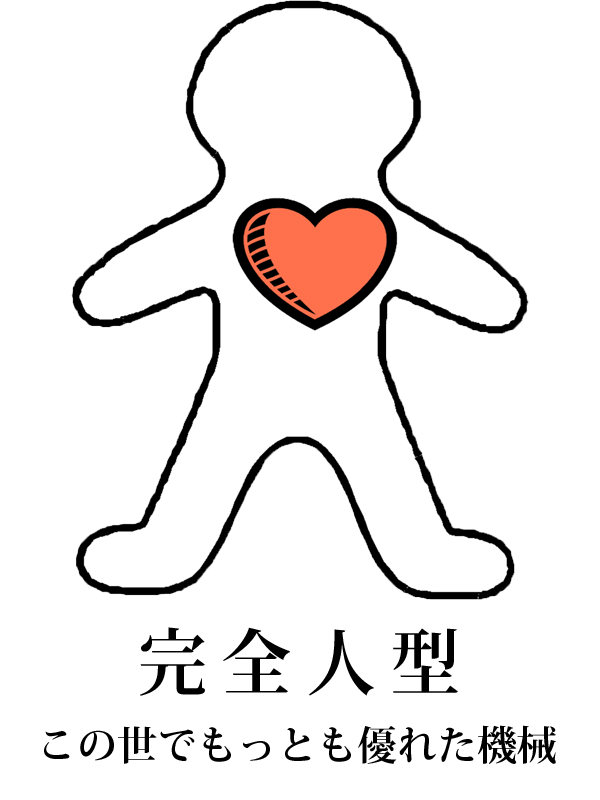
<style>
.page{position:relative;width:600px;height:800px;background:#ffffff}
.page>*{position:absolute;margin:0}
.t1{font:72px "KozMinPro-Bold";letter-spacing:0.22em;color:#000000;scale:0.96 1}
.t2{font:40px "KozMinPro-Bold";color:#000000}
</style>
<div class="page">
<p class="t1" style="left:140px;top:627px;width:318px;height:69px">完全人型</p>
<p class="t2" style="left:44px;top:725px;width:512px;height:39px">この世でもっとも優れた機械</p>
</div>
